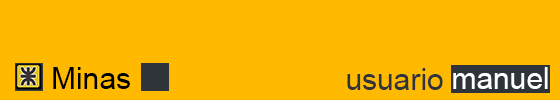
<style>
.page{position:relative;width:560px;height:100px;background:#ffba00}
.page>*{position:absolute;margin:0}
.t1{font:30px "ArialMT";color:#000000}
.t2{font:30px "ArialMT";color:#2f343a}
.t3{font:30px "ArialMT";color:#ffffff}
</style>
<div class="page">
<p class="t1" style="left:53px;top:67px;width:77px;height:22px">Minas</p>
<p class="t2" style="left:347px;top:68px;width:96px;height:22px">usuario</p>
<p class="t3" style="left:453px;top:67px;width:95px;height:22px">manuel</p>
</div>
